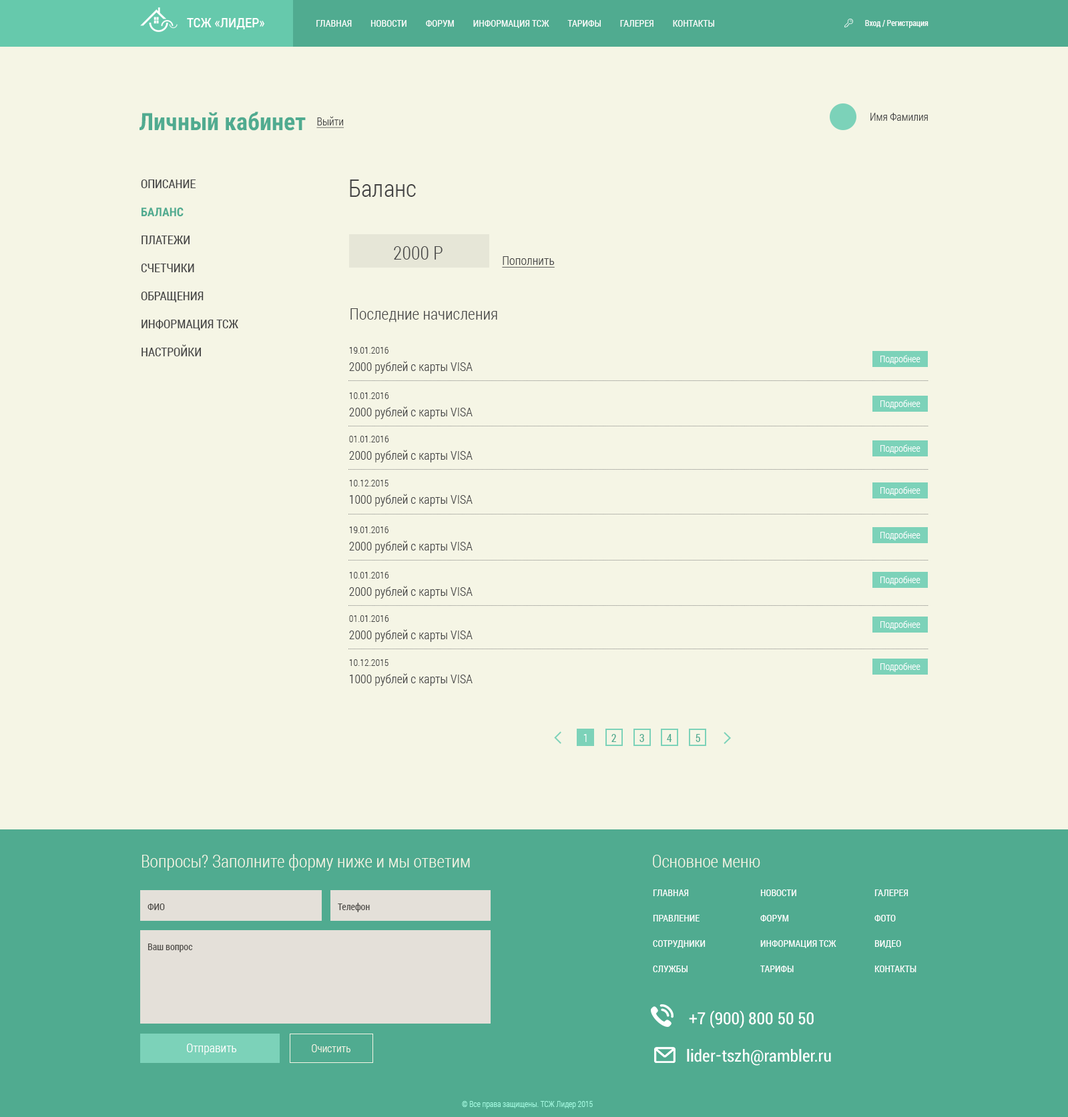
<style>
.page{position:relative;width:1068px;height:1117px;background:#f5f5e5}
.page>*{position:absolute;margin:0}
.t1{font:13.3px "RobotoCondensed-Regular";letter-spacing:0.005em;color:#ffffff}
.t2{font:9.3px "RobotoCondensed-Regular";letter-spacing:0.005em;color:#ffffff}
.t3{font:8px "RobotoCondensed-Regular";color:#ffffff}
.t4{font:24px "RobotoCondensed-Bold";color:#50ab90}
.t5{font:10.7px "RobotoCondensed-Light";color:#454545}
.t6{font:10.7px "RobotoCondensed-Light";color:#454545;text-decoration:underline}
.t7{font:12px/28px "RobotoCondensed-Regular";color:#454545}
.t8{font:12px/28px "RobotoCondensed-Bold";color:#50ab90}
.t9{font:24px "RobotoCondensed-Light";color:#454545}
.t10{font:18.7px "RobotoCondensed-Light";letter-spacing:0.005em;color:#454545}
.t11{font:12px "RobotoCondensed-Light";letter-spacing:0.005em;color:#454545;text-decoration:underline}
.t12{font:16px "RobotoCondensed-Light";letter-spacing:0.005em;color:#454545}
.t13{font:12px/17.3px "RobotoCondensed-Light";letter-spacing:0.005em;color:#454545}
.t14{font:9.3px/17.3px "RobotoCondensed-Light";letter-spacing:0.005em;color:#454545}
.t15{font:9.3px "RobotoCondensed-Light";letter-spacing:0.005em;color:#fefeff}
.t16{font:10.7px "RobotoCondensed-Light";color:#ffffff}
.t17{font:10.7px "RobotoCondensed-Regular";color:#50ab90}
.t18{font:17.3px "RobotoCondensed-Light";color:#f5f5e5}
.t19{font:9.3px/25.4px "RobotoCondensed-Regular";color:#ffffff}
.t20{font:9.3px "RobotoCondensed-Regular";color:#4c4a46}
.t21{font:17.3px "Roboto-Condensed";color:#ffffff}
.t22{font:12px "RobotoCondensed-Light";color:#ffffff}
.t23{font:10.7px "RobotoCondensed-Light";color:#f5f5e5}
.t24{font:8px "RobotoCondensed-Light";color:#a6fde3}
</style>
<div class="page">
<p class="t1" style="left:187px;top:18px;width:77px;height:11px">ТСЖ «ЛИДЕР»</p>
<p class="t2" style="left:316px;top:20px;width:398px;height:8px">ГЛАВНАЯ         НОВОСТИ         ФОРУМ         ИНФОРМАЦИЯ ТСЖ         ТАРИФЫ         ГАЛЕРЕЯ         КОНТАКТЫ</p>
<p class="t3" style="left:865px;top:20px;width:63px;height:8px">Вход / Регистрация</p>
<p class="t4" style="left:139px;top:111px;width:167px;height:20px">Личный кабинет</p>
<p class="t5" style="left:870px;top:113px;width:57px;height:8px">Имя Фамилия</p>
<p class="t6" style="left:316px;top:116px;width:28px;height:12px">Выйти</p>
<p class="t7" style="left:141px;top:179px;width:97px;height:177px">ОПИСАНИЕ<br><span class="t8">БАЛАНС<br></span>ПЛАТЕЖИ<br>СЧЕТЧИКИ<br>ОБРАЩЕНИЯ<br>ИНФОРМАЦИЯ ТСЖ<br>НАСТРОЙКИ</p>
<p class="t9" style="left:350px;top:179px;width:66px;height:18px">Баланс</p>
<p class="t10" style="left:394px;top:246px;width:48px;height:14px">2000 P</p>
<p class="t11" style="left:502px;top:256px;width:52px;height:12px">Пополнить</p>
<p class="t12" style="left:350px;top:308px;width:147px;height:14px">Последние начисления</p>
<p class="t13" style="left:349px;top:347px;width:123px;height:27px"><span class="t14">19.01.2016<br></span>2000 рублей с карты VISA</p>
<p class="t15" style="left:880px;top:355px;width:40px;height:9px">Подробнее</p>
<p class="t13" style="left:349px;top:392px;width:123px;height:27px"><span class="t14">10.01.2016<br></span>2000 рублей с карты VISA</p>
<p class="t15" style="left:880px;top:400px;width:40px;height:9px">Подробнее</p>
<p class="t13" style="left:349px;top:436px;width:123px;height:26px"><span class="t14">01.01.2016<br></span>2000 рублей с карты VISA</p>
<p class="t15" style="left:880px;top:444px;width:40px;height:10px">Подробнее</p>
<p class="t13" style="left:349px;top:480px;width:123px;height:26px"><span class="t14">10.12.2015<br></span>1000 рублей с карты VISA</p>
<p class="t15" style="left:880px;top:486px;width:40px;height:10px">Подробнее</p>
<p class="t13" style="left:349px;top:526px;width:123px;height:27px"><span class="t14">19.01.2016<br></span>2000 рублей с карты VISA</p>
<p class="t15" style="left:880px;top:531px;width:40px;height:9px">Подробнее</p>
<p class="t13" style="left:349px;top:572px;width:123px;height:27px"><span class="t14">10.01.2016<br></span>2000 рублей с карты VISA</p>
<p class="t15" style="left:880px;top:576px;width:40px;height:9px">Подробнее</p>
<p class="t13" style="left:349px;top:615px;width:123px;height:27px"><span class="t14">01.01.2016<br></span>2000 рублей с карты VISA</p>
<p class="t15" style="left:880px;top:621px;width:40px;height:9px">Подробнее</p>
<p class="t13" style="left:349px;top:659px;width:123px;height:27px"><span class="t14">10.12.2015<br></span>1000 рублей с карты VISA</p>
<p class="t15" style="left:880px;top:663px;width:40px;height:9px">Подробнее</p>
<p class="t16" style="left:583px;top:734px;width:4px;height:8px">1</p>
<p class="t17" style="left:611px;top:734px;width:5px;height:8px">2</p>
<p class="t17" style="left:639px;top:734px;width:5px;height:8px">3</p>
<p class="t17" style="left:667px;top:734px;width:5px;height:8px">4</p>
<p class="t17" style="left:695px;top:734px;width:5px;height:8px">5</p>
<p class="t18" style="left:142px;top:854px;width:328px;height:17px">Вопросы? Заполните форму ниже и мы ответим</p>
<p class="t18" style="left:653px;top:855px;width:107px;height:12px">Основное меню</p>
<p class="t19" style="left:653px;top:889px;width:52px;height:83px">ГЛАВНАЯ<br>ПРАВЛЕНИЕ<br>СОТРУДНИКИ<br>СЛУЖБЫ</p>
<p class="t19" style="left:760px;top:889px;width:76px;height:83px">НОВОСТИ<br>ФОРУМ<br>ИНФОРМАЦИЯ ТСЖ<br>ТАРИФЫ</p>
<p class="t19" style="left:874px;top:889px;width:42px;height:83px">ГАЛЕРЕЯ<br>ФОТО<br>ВИДЕО<br>КОНТАКТЫ</p>
<p class="t20" style="left:147px;top:903px;width:18px;height:7px">ФИО</p>
<p class="t20" style="left:338px;top:903px;width:32px;height:9px">Телефон</p>
<p class="t20" style="left:147px;top:943px;width:46px;height:9px">Ваш вопрос</p>
<p class="t21" style="left:689px;top:1010px;width:124px;height:18px">+7 (900) 800 50 50</p>
<p class="t22" style="left:187px;top:1044px;width:49px;height:11px">Отправить</p>
<p class="t23" style="left:312px;top:1044px;width:38px;height:8px">Очистить</p>
<p class="t21" style="left:687px;top:1049px;width:144px;height:17px">lider-tszh@rambler.ru</p>
<p class="t24" style="left:462px;top:1101px;width:131px;height:8px">© Все права защищены. ТСЖ Лидер 2015</p>
</div>
